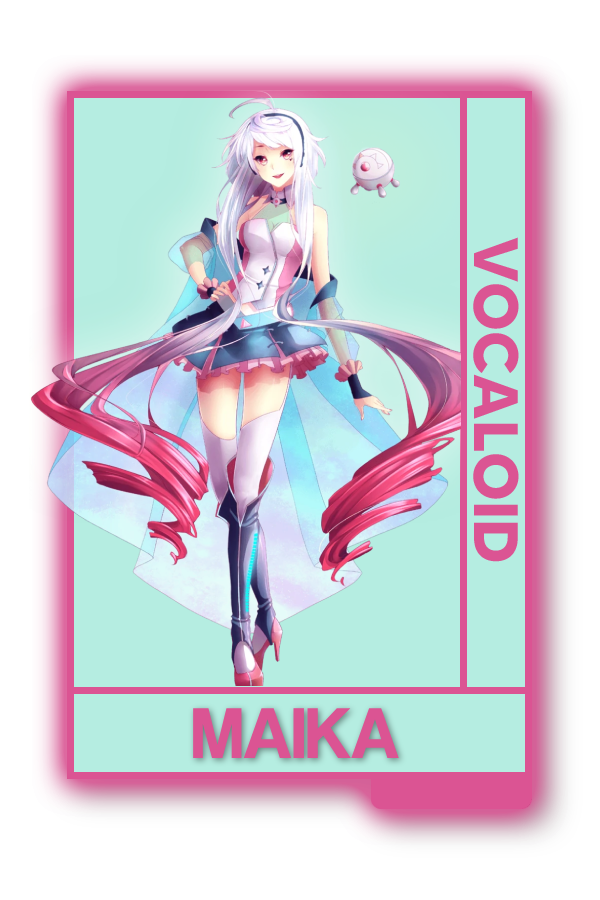
<style>
.page{position:relative;width:600px;height:900px;background:#ffffff}
.page>*{position:absolute;margin:0}
.t1{font:62.5px "MADETOMMY-Bold";color:#db5493}
.t2{font:75px "CoolveticaRg-Regular";color:#db5493}
</style>
<div class="page">
<p class="t1" style="left:473px;top:237px;width:46px;height:325px;rotate:90deg">VOCALOID</p>
<p class="t2" style="left:193px;top:708px;width:206px;height:50px">MAIKA</p>
</div>
